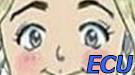
<style>
.page{position:relative;width:135px;height:75px}
.page>*{position:absolute;margin:0}
.t1{font:24px "Tahoma-Bold";letter-spacing:-0.065em;font-weight:bold;font-style:italic}
</style>
<div class="page">
<p class="t1" style="left:86px;top:55px;width:48px;height:19px">ECU</p>
</div>
